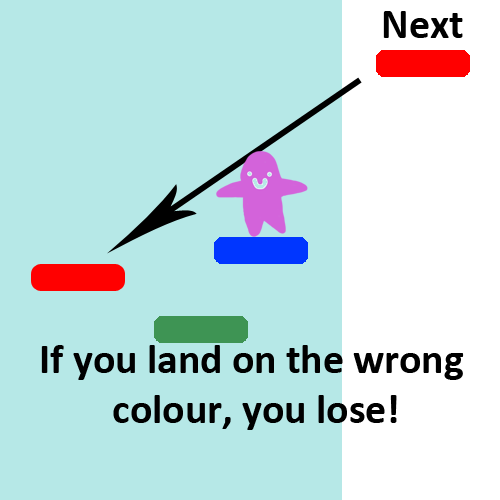
<style>
.page{position:relative;width:500px;height:500px;background:#b6e8e7}
.page>*{position:absolute;margin:0}
.t1{font:41.7px "Calibri-Bold";color:#000000}
</style>
<div class="page">
<p class="t1" style="left:41px;top:345px;width:423px;height:85px;text-align:center">If you land on the wrong <br>colour, you lose!</p>
</div>
